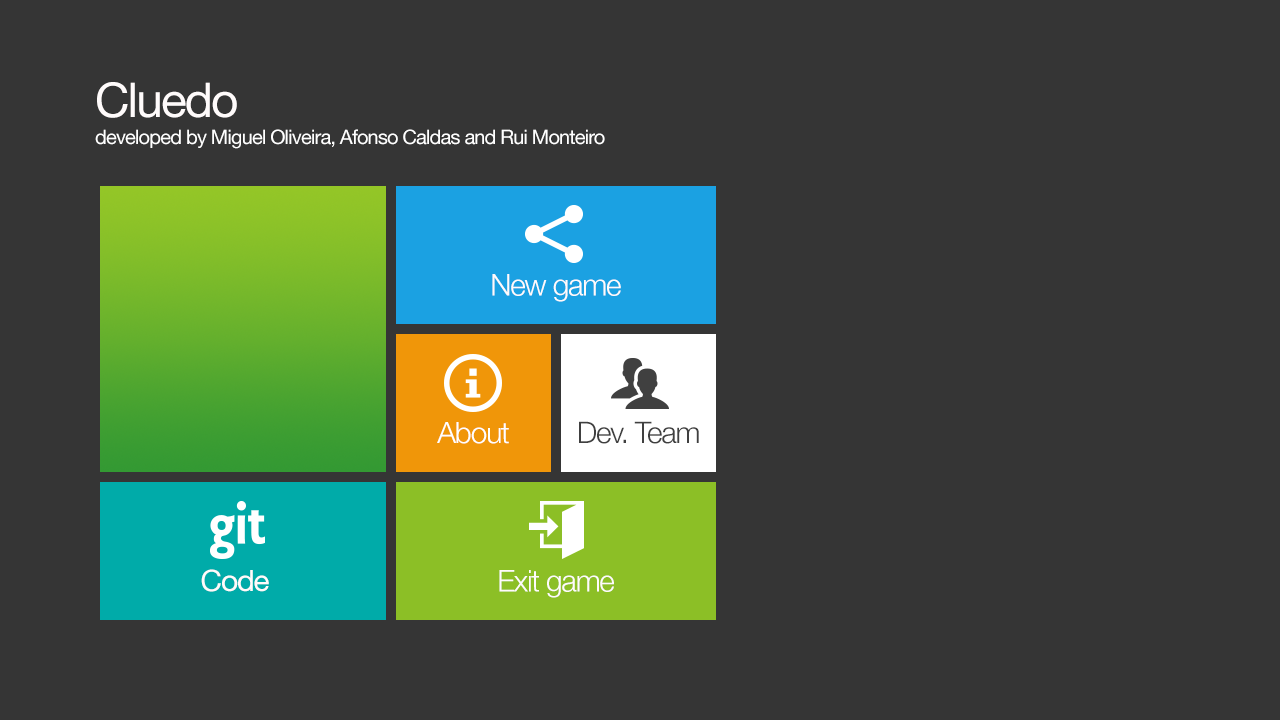
<style>
.page{position:relative;width:1280px;height:720px;background:#353535}
.page>*{position:absolute;margin:0}
.t1{font:48px "HelveticaNeue";letter-spacing:-0.04em;color:#fffbfb}
.t2{font:20px "HelveticaNeue";letter-spacing:-0.04em;color:#ffffff}
.t3{font:29.9px "HelveticaNeue-Light";letter-spacing:-0.04em;color:#fffbfb}
.t4{font:29.4px "HelveticaNeue-Light";letter-spacing:-0.04em;color:#ffffff}
.t5{font:29.7px "HelveticaNeue-Light";letter-spacing:-0.04em;color:#404040}
.t6{font:29.4px "HelveticaNeue";letter-spacing:-0.04em;color:#fffbfb}
</style>
<div class="page">
<p class="t1" style="left:97px;top:82px;width:140px;height:36px">Cluedo</p>
<p class="t2" style="left:95px;top:129px;width:510px;height:20px">developed by Miguel Oliveira, Afonso Caldas and Rui Monteiro</p>
<p class="t3" style="left:492px;top:274px;width:129px;height:28px">New game</p>
<p class="t4" style="left:437px;top:422px;width:72px;height:22px">About</p>
<p class="t5" style="left:579px;top:421px;width:120px;height:23px">Dev. Team</p>
<p class="t6" style="left:201px;top:569px;width:68px;height:23px">Code</p>
<p class="t3" style="left:499px;top:570px;width:115px;height:28px">Exit game</p>
</div>
